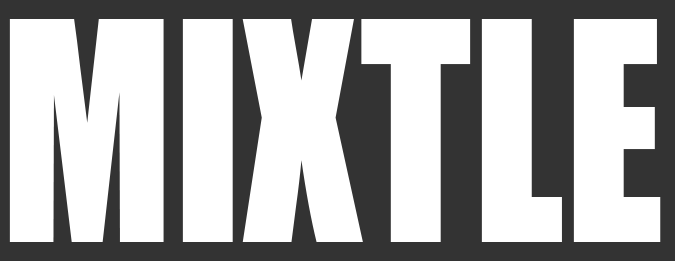
<style>
.page{position:relative;width:675px;height:261px;background:#ffffff}
.page>*{position:absolute;margin:0}
.t1{font:282.2px "Impact";color:#ffffff;scale:0.86 1}
</style>
<div class="page">
<p class="t1" style="left:9px;top:19px;width:652px;height:223px">MIXTLE</p>
</div>
